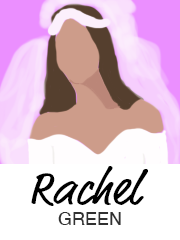
<style>
.page{position:relative;width:180px;height:240px;background:#ffffff}
.page>*{position:absolute;margin:0}
.t1{font:48px "MarketPro";color:#000000}
.t2{font:18px "Helvetica";color:#313131;text-transform:uppercase}
</style>
<div class="page">
<p class="t1" style="left:31px;top:166px;width:117px;height:40px">Rachel</p>
<p class="t2" style="left:58px;top:212px;width:63px;height:13px">Green</p>
</div>
